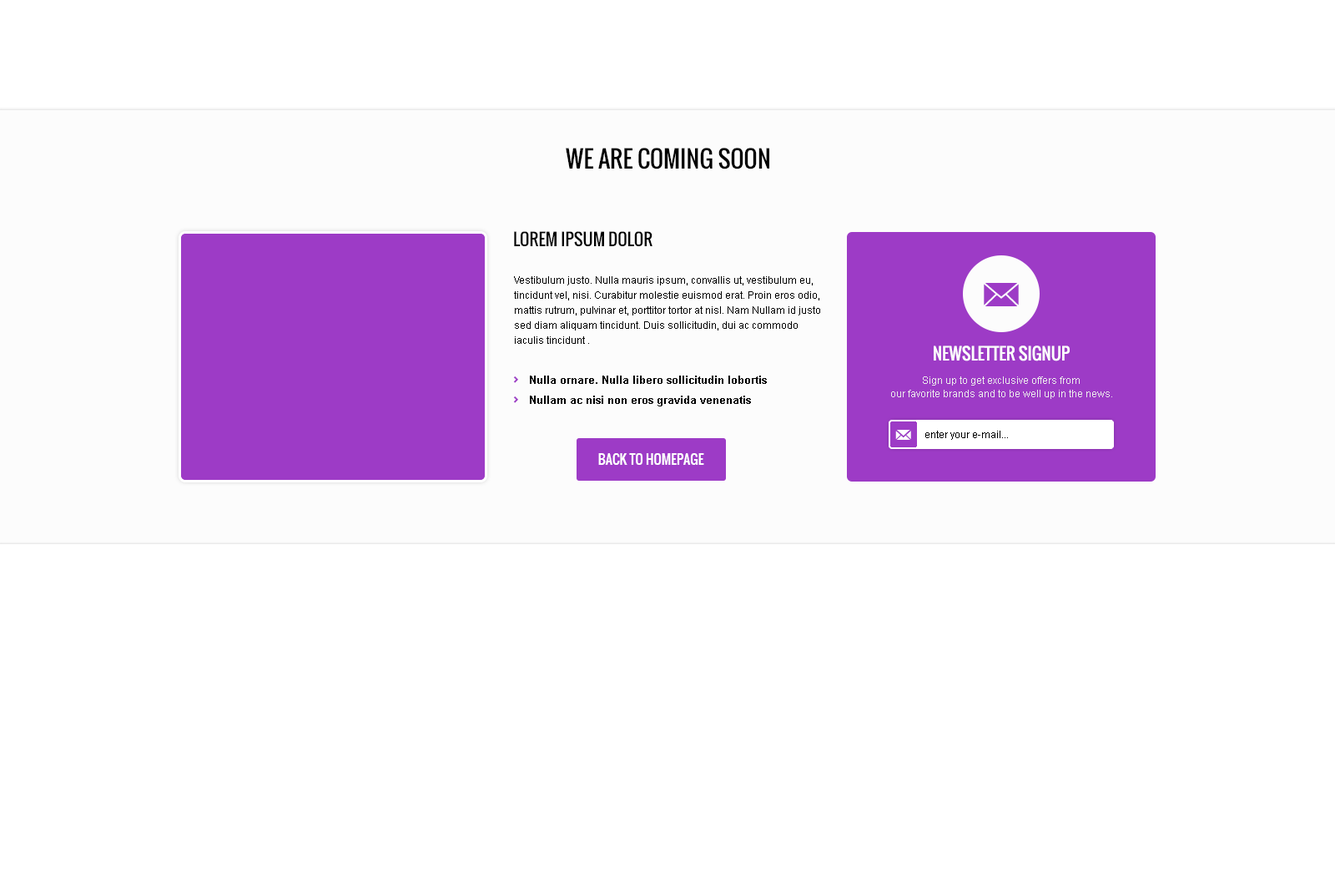
<style>
.page{position:relative;width:1335px;height:893px;background:#ffffff}
.page>*{position:absolute;margin:0}
.t1{font:23.4px "Oswald";color:#000000;text-transform:uppercase}
.t2{font:16.7px "Oswald";color:#000000;text-transform:uppercase}
.t3{font:10px/15px "ArialMT";color:#000000}
.t4{font:33.4px "andepict";color:#9d3bc6;text-transform:uppercase}
.t5{font:16.7px "Oswald";color:#fcfcfc;text-transform:uppercase}
.t6{font:10.8px/20px "Arial-BoldMT";color:#000000}
.t7{font:10px/13.4px "ArialMT";color:#ececec}
.t8{font:10px "ArialMT";color:#000000}
.t9{font:13.4px "Oswald";color:#ffffff;text-transform:uppercase}
</style>
<div class="page">
<p class="t1" style="left:566px;top:148px;width:203px;height:21px">WE ARE COMING SOON</p>
<p class="t2" style="left:514px;top:231px;width:139px;height:16px">Lorem ipsum dolor</p>
<p class="t3" style="left:514px;top:276px;width:306px;height:68px">Vestibulum justo. Nulla mauris ipsum, convallis ut, vestibulum eu, tincidunt vel, nisi. Curabitur molestie euismod erat. Proin eros odio, mattis rutrum, pulvinar et, porttitor tortor at nisl. Nam Nullam id justo sed diam aliquam tincidunt. Duis sollicitudin, dui ac commodo iaculis tincidunt .</p>
<p class="t4" style="left:984px;top:283px;width:35px;height:23px">]</p>
<p class="t5" style="left:934px;top:346px;width:136px;height:15px">NEWSLETTER SIGNUP</p>
<p class="t6" style="left:530px;top:376px;width:237px;height:30px">Nulla ornare. Nulla libero sollicitudin lobortis  <br>Nullam ac nisi non eros gravida venenatis</p>
<p class="t7" style="left:891px;top:376px;width:221px;height:23px;text-align:center">Sign up to get exclusive offers from<br>our favorite brands and to be well up in the news.</p>
<p class="t8" style="left:926px;top:431px;width:82px;height:9px">enter your e-mail...</p>
<p class="t9" style="left:598px;top:453px;width:106px;height:12px">Back to homepage</p>
</div>
